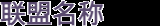
<style>
.page{position:relative;width:160px;height:26px;background:#000000}
.page>*{position:absolute;margin:0}
.t1{font:26px "WebPSD-18463539-0-Regular";color:#59496e;font-weight:bold}
</style>
<div class="page">
<p class="t1" style="left:0px;top:0px;width:160px;height:26px">联盟名称</p>
</div>
